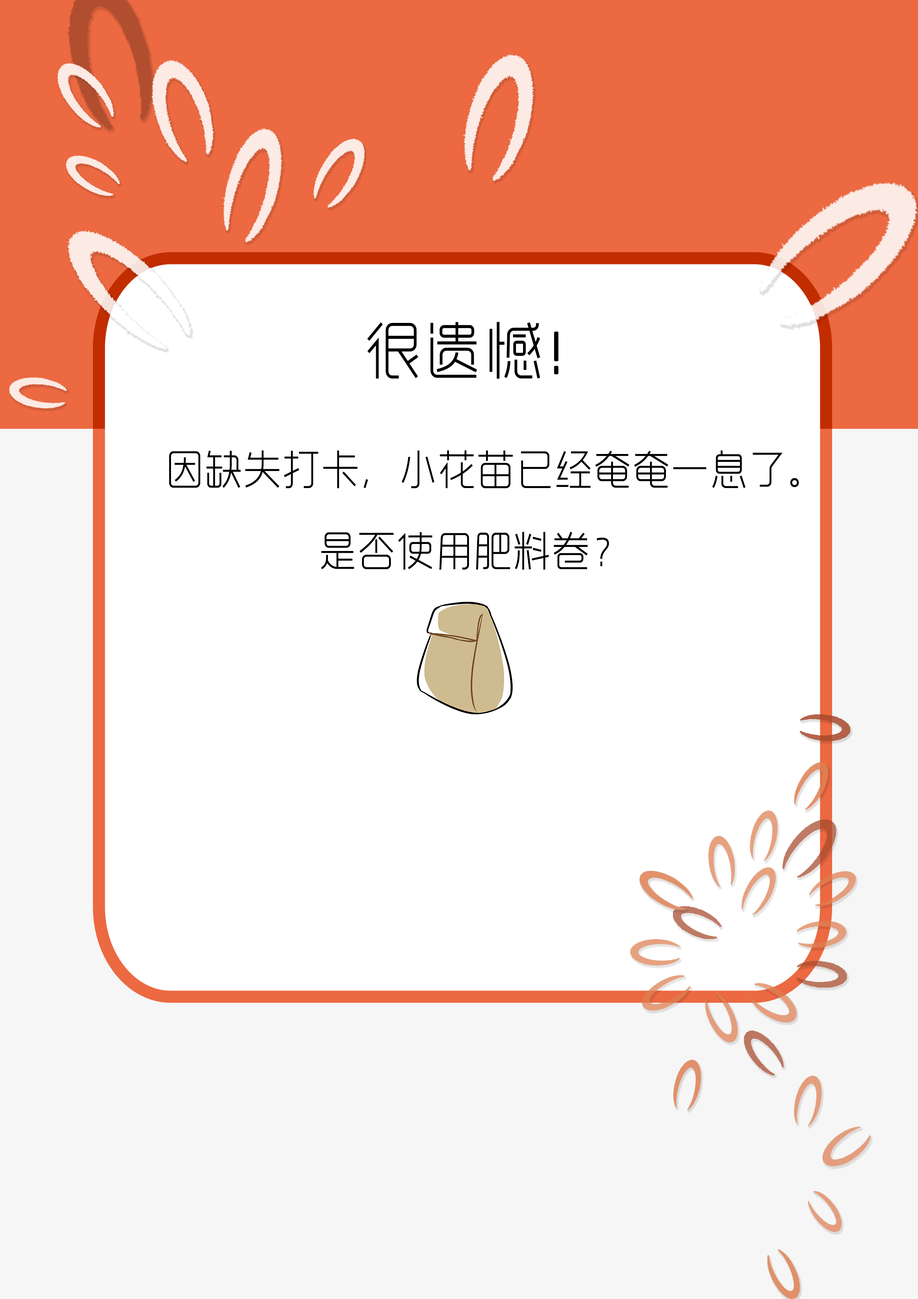
<style>
.page{position:relative;width:918px;height:1299px;background:#ffffff}
.page>*{position:absolute;margin:0}
.t1{font:61.1px "RTWSYueGoTrial-Light";letter-spacing:0.1em;color:#000000;scale:0.91 1}
.t2{font:61.1px "RTWSYueGoTrial-Light";letter-spacing:0.1em;color:#000000;font-weight:bold;scale:0.91 1}
.t3{font:40.7px "RTWSYueGoTrial-Light";letter-spacing:0.05em;color:#000000;scale:0.91 1}
</style>
<div class="page">
<p class="t1" style="left:367px;top:322px;width:192px;height:57px">很遗憾<span class="t2">！</span></p>
<p class="t3" style="left:169px;top:450px;width:630px;height:38px">因缺失打卡，小花苗已经奄奄一息了。</p>
<p class="t3" style="left:321px;top:532px;width:288px;height:38px">是否使用肥料卷？</p>
</div>
